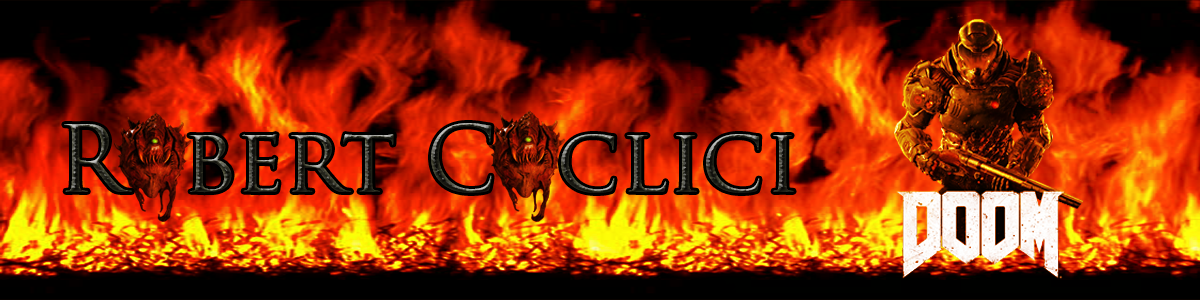
<style>
.page{position:relative;width:1200px;height:300px}
.page>*{position:absolute;margin:0}
.t1{font:90px "TrajanPro-Regular"}
</style>
<div class="page">
<p class="t1" style="left:64px;top:123px;width:730px;height:70px">R  bert C  clici</p>
</div>
